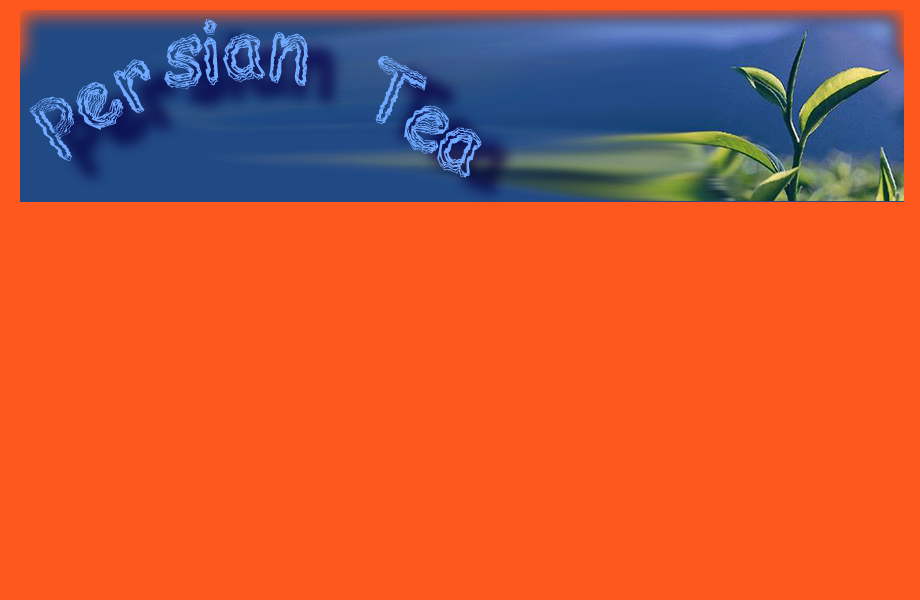
<style>
.page{position:relative;width:920px;height:600px;background:#ff581e}
.page>*{position:absolute;margin:0}
.t1{font:87.4px "BeerGlass";color:#71aaff}
</style>
<div class="page">
<p class="t1" style="left:29px;top:19px;width:453px;height:159px">Persian Tea</p>
</div>
